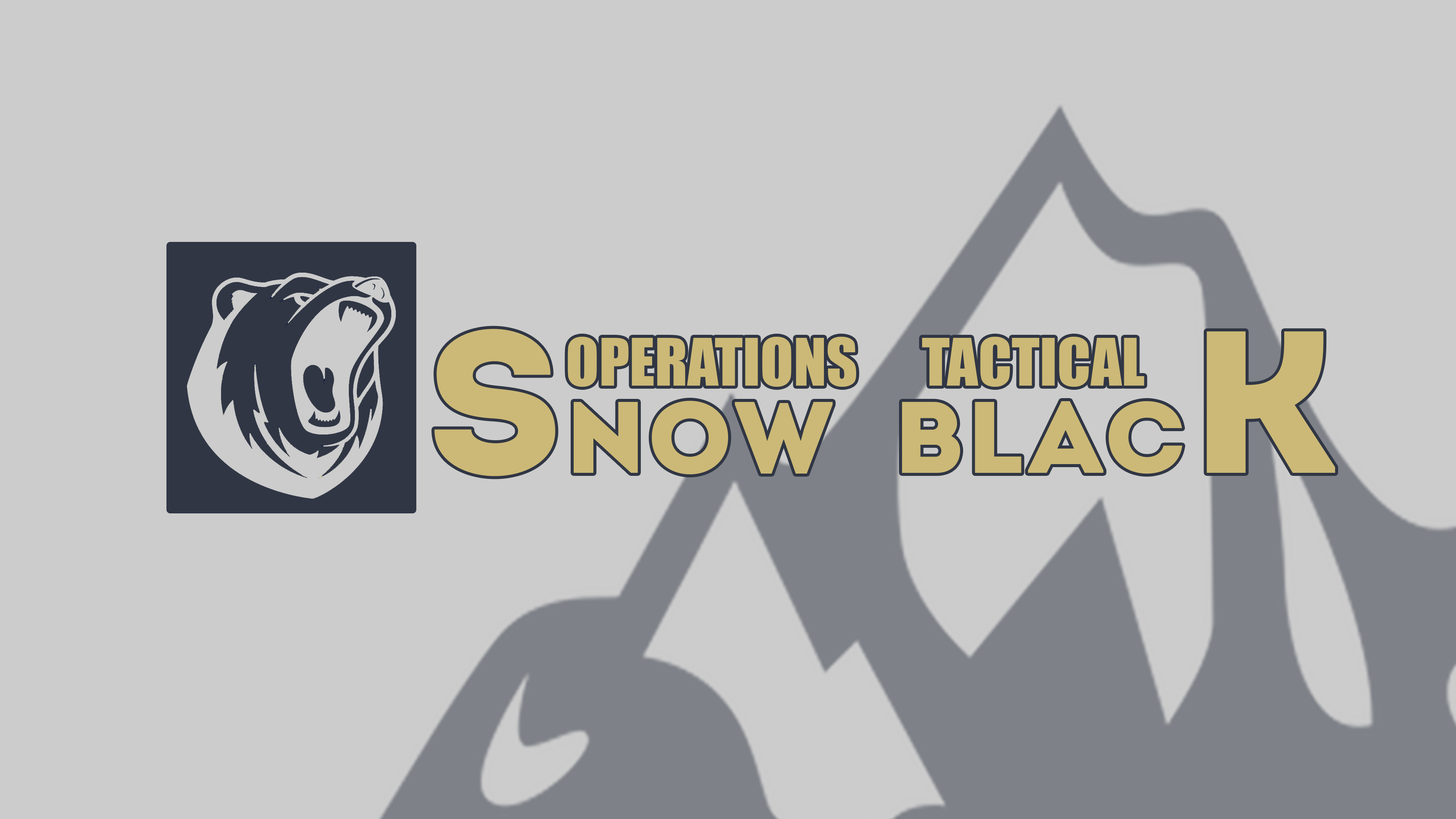
<style>
.page{position:relative;width:1456px;height:819px;background:#cccccc}
.page>*{position:absolute;margin:0}
.t1{font:101.1px "Intro";color:#ccb977;scale:1.05 1}
.t2{font:202.2px "Intro";color:#ccb977;scale:1.05 1}
.t3{font:60.7px "Impact";color:#ccb977}
</style>
<div class="page">
<p class="t1" style="left:435px;top:329px;width:900px;height:147px"><span class="t2">S</span>now  Blac<span class="t2">k</span></p>
<p class="t3" style="left:568px;top:336px;width:576px;height:51px">OPERATIONS      TACTICAL</p>
</div>
